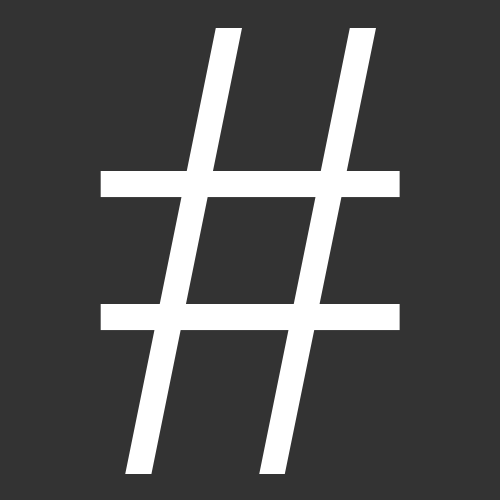
<style>
.page{position:relative;width:500px;height:500px;background:#333333}
.page>*{position:absolute;margin:0}
.t1{font:644.8px "TimesNewRomanPSMT";color:#ffffff}
</style>
<div class="page">
<p class="t1" style="left:100px;top:28px;width:300px;height:446px">#</p>
</div>
